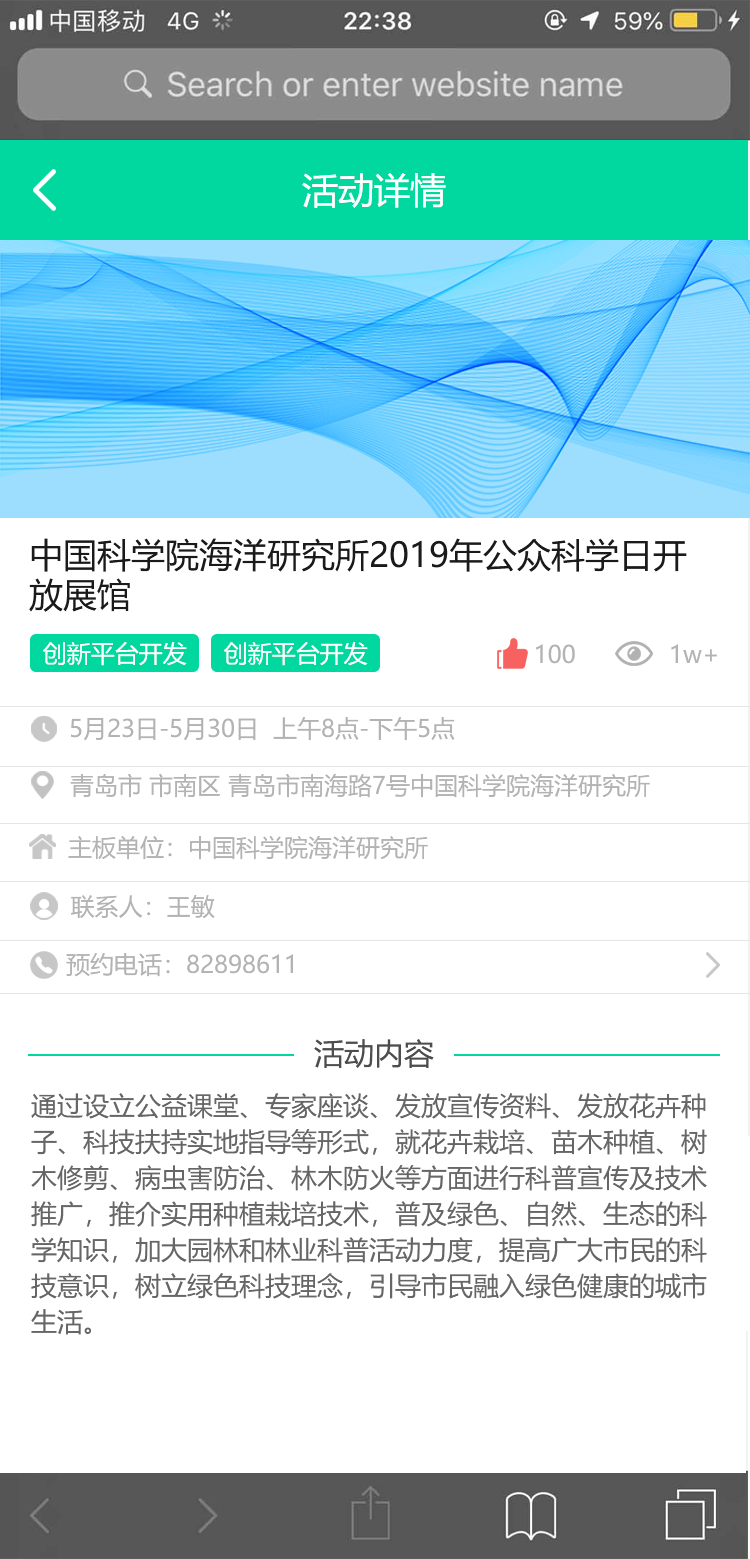
<style>
.page{position:relative;width:750px;height:1559px;background:#ffffff}
.page>*{position:absolute;margin:0}
.t1{font:36px "MicrosoftYaHei";color:#ffffff}
.t2{font:34px/44px "MicrosoftYaHei";color:#1a1a1a}
.t3{font:24px "MicrosoftYaHei";color:#ffffff}
.t4{font:24px "MicrosoftYaHei";color:#b3b3b3}
.t5{font:30px "MicrosoftYaHei";color:#4d4d4d}
.t6{font:26px/36px "MicrosoftYaHei";color:#666666}
</style>
<div class="page">
<p class="t1" style="left:302px;top:173px;width:144px;height:35px">活动详情</p>
<p class="t2" style="left:29px;top:538px;width:658px;height:74px">中国科学院海洋研究所2019年公众科学日开<br>放展馆</p>
<p class="t3" style="left:43px;top:642px;width:144px;height:24px">创新平台开发</p>
<p class="t3" style="left:224px;top:642px;width:144px;height:24px">创新平台开发</p>
<p class="t4" style="left:536px;top:644px;width:39px;height:20px">100</p>
<p class="t4" style="left:671px;top:644px;width:46px;height:19px">1w+</p>
<p class="t4" style="left:71px;top:717px;width:384px;height:24px">5月23日-5月30日  上午8点-下午5点</p>
<p class="t4" style="left:70px;top:773px;width:580px;height:25px">青岛市 市南区 青岛市南海路7号中国科学院海洋研究所</p>
<p class="t4" style="left:68px;top:836px;width:360px;height:24px">主板单位：中国科学院海洋研究所</p>
<p class="t4" style="left:71px;top:895px;width:144px;height:23px">联系人：王敏</p>
<p class="t4" style="left:66px;top:953px;width:227px;height:24px">预约电话：82898611</p>
<p class="t5" style="left:314px;top:1039px;width:120px;height:29px">活动内容</p>
<p class="t6" style="left:31px;top:1093px;width:676px;height:242px">通过设立公益课堂、专家座谈、发放宣传资料、发放花卉种子、科技扶持实地指导等形式，就花卉栽培、苗木种植、树木修剪、病虫害防治、林木防火等方面进行科普宣传及技术推广，推介实用种植栽培技术，普及绿色、自然、生态的科学知识，加大园林和林业科普活动力度，提高广大市民的科技意识，树立绿色科技理念，引导市民融入绿色健康的城市生活。</p>
</div>
